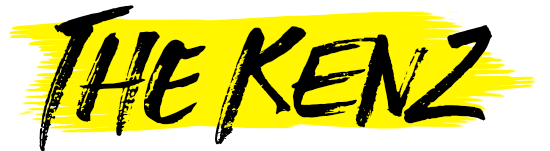
<style>
.page{position:relative;width:550px;height:151px;background:#ffffff}
.page>*{position:absolute;margin:0}
.t1{font:140px "STONEHARBOUR-Italic";color:#000000}
</style>
<div class="page">
<p class="t1" style="left:39px;top:5px;width:454px;height:147px">The KEnz</p>
</div>
